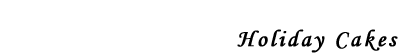
<style>
.page{position:relative;width:400px;height:55px;background:#ffffff}
.page>*{position:absolute;margin:0}
.t1{font:24px "MonotypeCorsiva";letter-spacing:0.1em;color:#000000;font-weight:bold}
</style>
<div class="page">
<p class="t1" style="left:237px;top:29px;width:161px;height:24px">Holiday Cakes</p>
</div>
